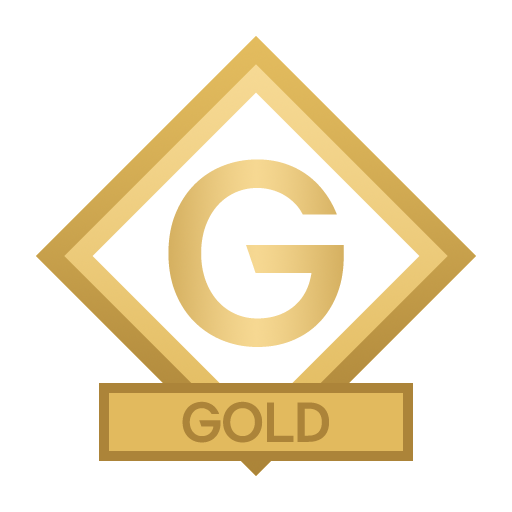
<style>
.page{position:relative;width:512px;height:512px;background:#ffffff}
.page>*{position:absolute;margin:0}
.t1{font:231.8px "yspotlight-regular";color:#e6c57b}
.t2{font:50px "yspotlight-regular";color:#ac8439}
</style>
<div class="page">
<p class="t1" style="left:168px;top:159px;width:176px;height:188px">G</p>
<p class="t2" style="left:182px;top:401px;width:147px;height:42px">GOLD</p>
</div>
